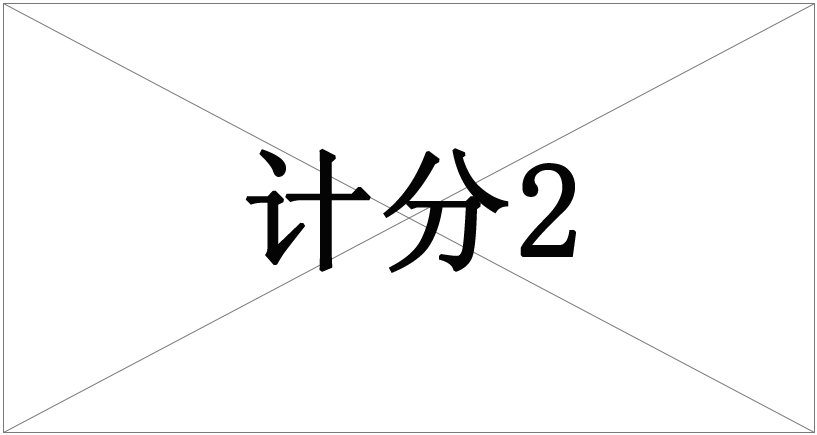
<style>
.page{position:relative;width:817px;height:435px;background:#ffffff}
.page>*{position:absolute;margin:0}
.t1{font:133.3px "SimSun";color:#040404;font-weight:bold}
</style>
<div class="page">
<p class="t1" style="left:245px;top:148px;width:331px;height:125px">计分2</p>
</div>
